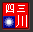
<style>
.page{position:relative;width:33px;height:32px;background:#f20000}
.page>*{position:absolute;margin:0}
.t1{font:10.4px "SimSun";color:#ffffff}
.t2{font:11.7px "SimSun";color:#ffffff}
</style>
<div class="page">
<p class="t1" style="left:6px;top:4px;width:19px;height:9px">四三</p>
<p class="t2" style="left:16px;top:15px;width:11px;height:12px">川</p>
</div>
